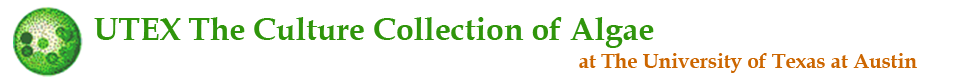
<style>
.page{position:relative;width:960px;height:80px;background:#ffffff}
.page>*{position:absolute;margin:0}
.t1{font:31.9px "BookAntiqua-Bold";color:#2f950b}
.t2{font:20.6px "BookAntiqua-Bold";color:#cc6600}
</style>
<div class="page">
<p class="t1" style="left:94px;top:17px;width:560px;height:31px">UTEX The Culture Collection of Algae</p>
<p class="t2" style="left:579px;top:53px;width:338px;height:20px">at The University of Texas at Austin</p>
</div>
